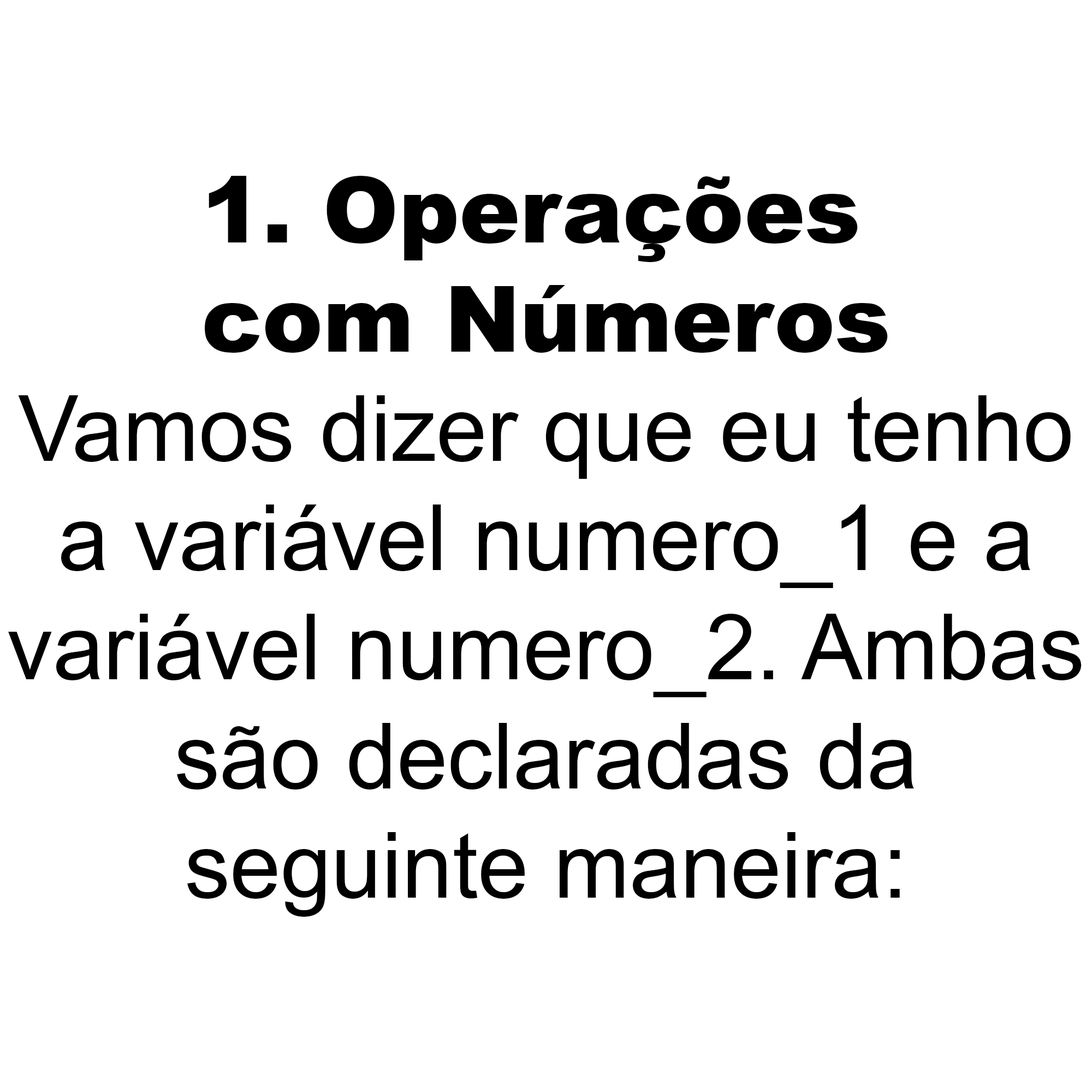
<style>
.page{position:relative;width:1092px;height:1092px;background:#ffffff}
.page>*{position:absolute;margin:0}
.t1{font:91px "ArialMT";color:#000000}
.t2{font:91px "Arial-Black";color:#000000}
</style>
<div class="page">
<p class="t1" style="left:8px;top:176px;width:1074px;height:741px;text-align:center"><span class="t2">1. Operações <br>com Números<br></span>Vamos dizer que eu tenho<br>a variável numero_1 e a<br>variável numero_2. Ambas<br>são declaradas da<br>seguinte maneira:</p>
</div>
